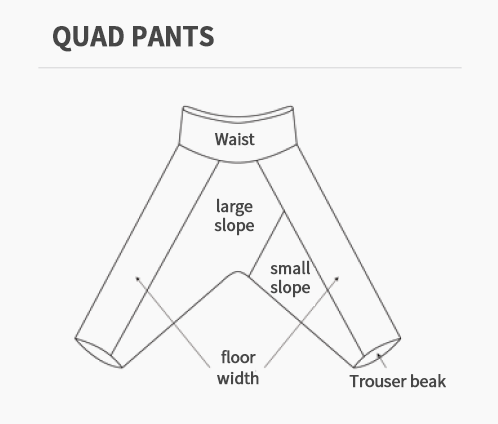
<style>
.page{position:relative;width:498px;height:424px;background:#f9f9f9}
.page>*{position:absolute;margin:0}
.t1{font:25.9px "NotoSansKR-Bold";letter-spacing:-0.025em;color:#474747;text-transform:uppercase;font-weight:bold}
.t2{font:16px "NotoSansKR-Regular";letter-spacing:-0.025em;color:#474747;font-weight:bold}
.t3{font:16px/18.7px "NotoSansKR-Regular";letter-spacing:-0.025em;color:#474747;font-weight:bold}
.t4{font:16px/20.6px "NotoSansKR-Regular";letter-spacing:-0.025em;color:#474747;font-weight:bold}
</style>
<div class="page">
<p class="t1" style="left:53px;top:26px;width:161px;height:26px">quad pants</p>
<p class="t2" style="left:214px;top:132px;width:41px;height:14px">Waist</p>
<p class="t3" style="left:214px;top:198px;width:40px;height:38px;text-align:center">large<br>slope</p>
<p class="t3" style="left:270px;top:260px;width:40px;height:38px;text-align:center">small<br>slope</p>
<p class="t4" style="left:217px;top:350px;width:42px;height:35px;text-align:center">floor<br>width</p>
<p class="t2" style="left:349px;top:374px;width:97px;height:14px">Trouser beak</p>
</div>
